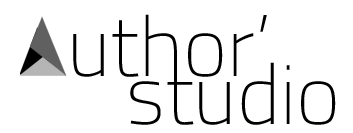
<style>
.page{position:relative;width:353px;height:133px;background:#ffffff}
.page>*{position:absolute;margin:0}
.t1{font:84px "TitilliumWeb-ExtraLight";color:#000000}
</style>
<div class="page">
<p class="t1" style="left:73px;top:14px;width:194px;height:63px">uthor’</p>
<p class="t1" style="left:130px;top:62px;width:206px;height:63px">studio</p>
</div>
